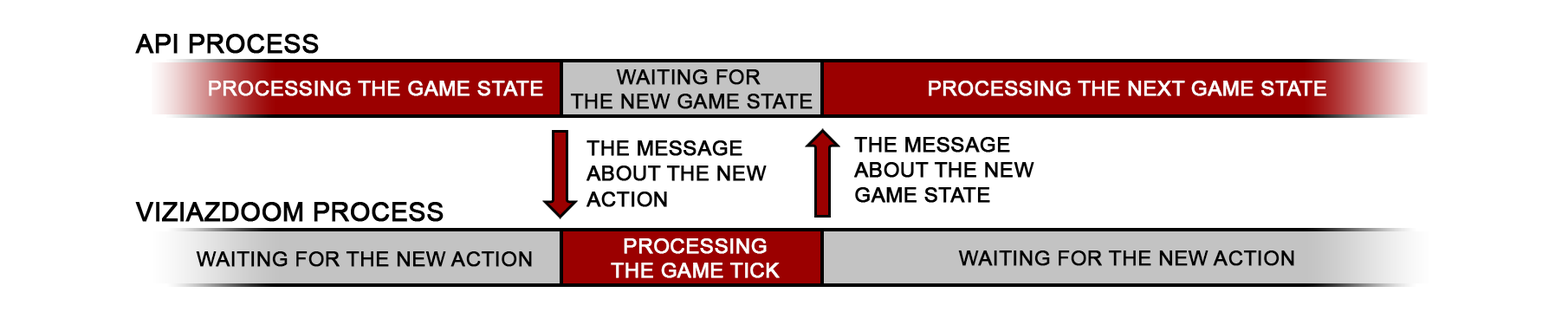
<style>
.page{position:relative;width:1568px;height:325px;background:#ffffff}
.page>*{position:absolute;margin:0}
.t1{font:26px/25.5px "ArialMT";color:#000000;text-transform:uppercase;font-weight:bold}
.t2{font:20.8px "ArialMT";color:#000000;text-transform:uppercase;font-weight:bold}
.t3{font:20.8px "ArialMT";color:#ffffff;text-transform:uppercase;font-weight:bold}
.t4{font:20.8px/25.5px "ArialMT";color:#000000;text-transform:uppercase;font-weight:bold}
</style>
<div class="page">
<p class="t1" style="left:135px;top:34px;width:309px;height:188px">API PROCESS<br><br><br><br><br><br><br>VIZIAZDOOM PROCESS</p>
<p class="t2" style="left:570px;top:69px;width:243px;height:40px;text-align:center">WAITING FOR <br>THE NEW GAME STATE</p>
<p class="t3" style="left:209px;top:81px;width:334px;height:15px">PROCESSING THE GAME STATE</p>
<p class="t3" style="left:929px;top:81px;width:397px;height:15px">PROCESSING THE NEXT GAME STATE</p>
<p class="t2" style="left:854px;top:137px;width:180px;height:66px">THE MESSAGE <br>ABOUT THE NEW <br>GAME STATE</p>
<p class="t4" style="left:586px;top:140px;width:181px;height:67px">THE MESSAGE <br>ABOUT THE NEW <br>ACTION</p>
<p class="t3" style="left:611px;top:238px;width:169px;height:40px;text-align:center">PROCESSING<br>THE GAME TICK</p>
<p class="t2" style="left:196px;top:251px;width:336px;height:16px">Waiting for THE NEW ACTION</p>
<p class="t2" style="left:958px;top:250px;width:336px;height:16px">Waiting for THE NEW ACTION</p>
</div>
